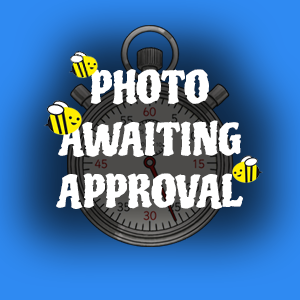
<style>
.page{position:relative;width:300px;height:300px}
.page>*{position:absolute;margin:0}
.t1{font:43px "Piedra-Regular";color:#ffffff}
</style>
<div class="page">
<p class="t1" style="left:56px;top:69px;width:187px;height:140px;text-align:center">PHOTO<br>AWAITING<br>APPROVAL</p>
</div>
